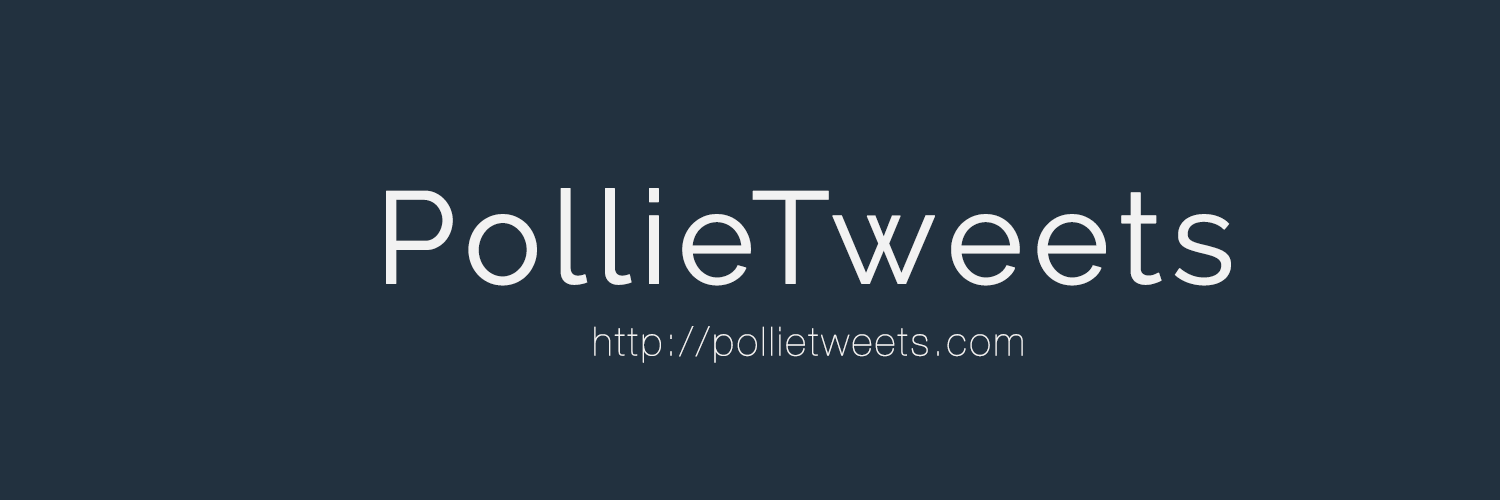
<style>
.page{position:relative;width:1500px;height:500px;background:#22313f}
.page>*{position:absolute;margin:0}
.t1{font:130px "Raleway";letter-spacing:0.05em;color:#f2f2f2;font-weight:bold}
.t2{font:40px "HelveticaNeue-UltraLight";letter-spacing:0.05em;color:#f2f2f2;font-weight:bold}
</style>
<div class="page">
<p class="t1" style="left:386px;top:188px;width:845px;height:98px">PollieTweets</p>
<p class="t2" style="left:594px;top:326px;width:429px;height:37px">http://pollietweets.com</p>
</div>
